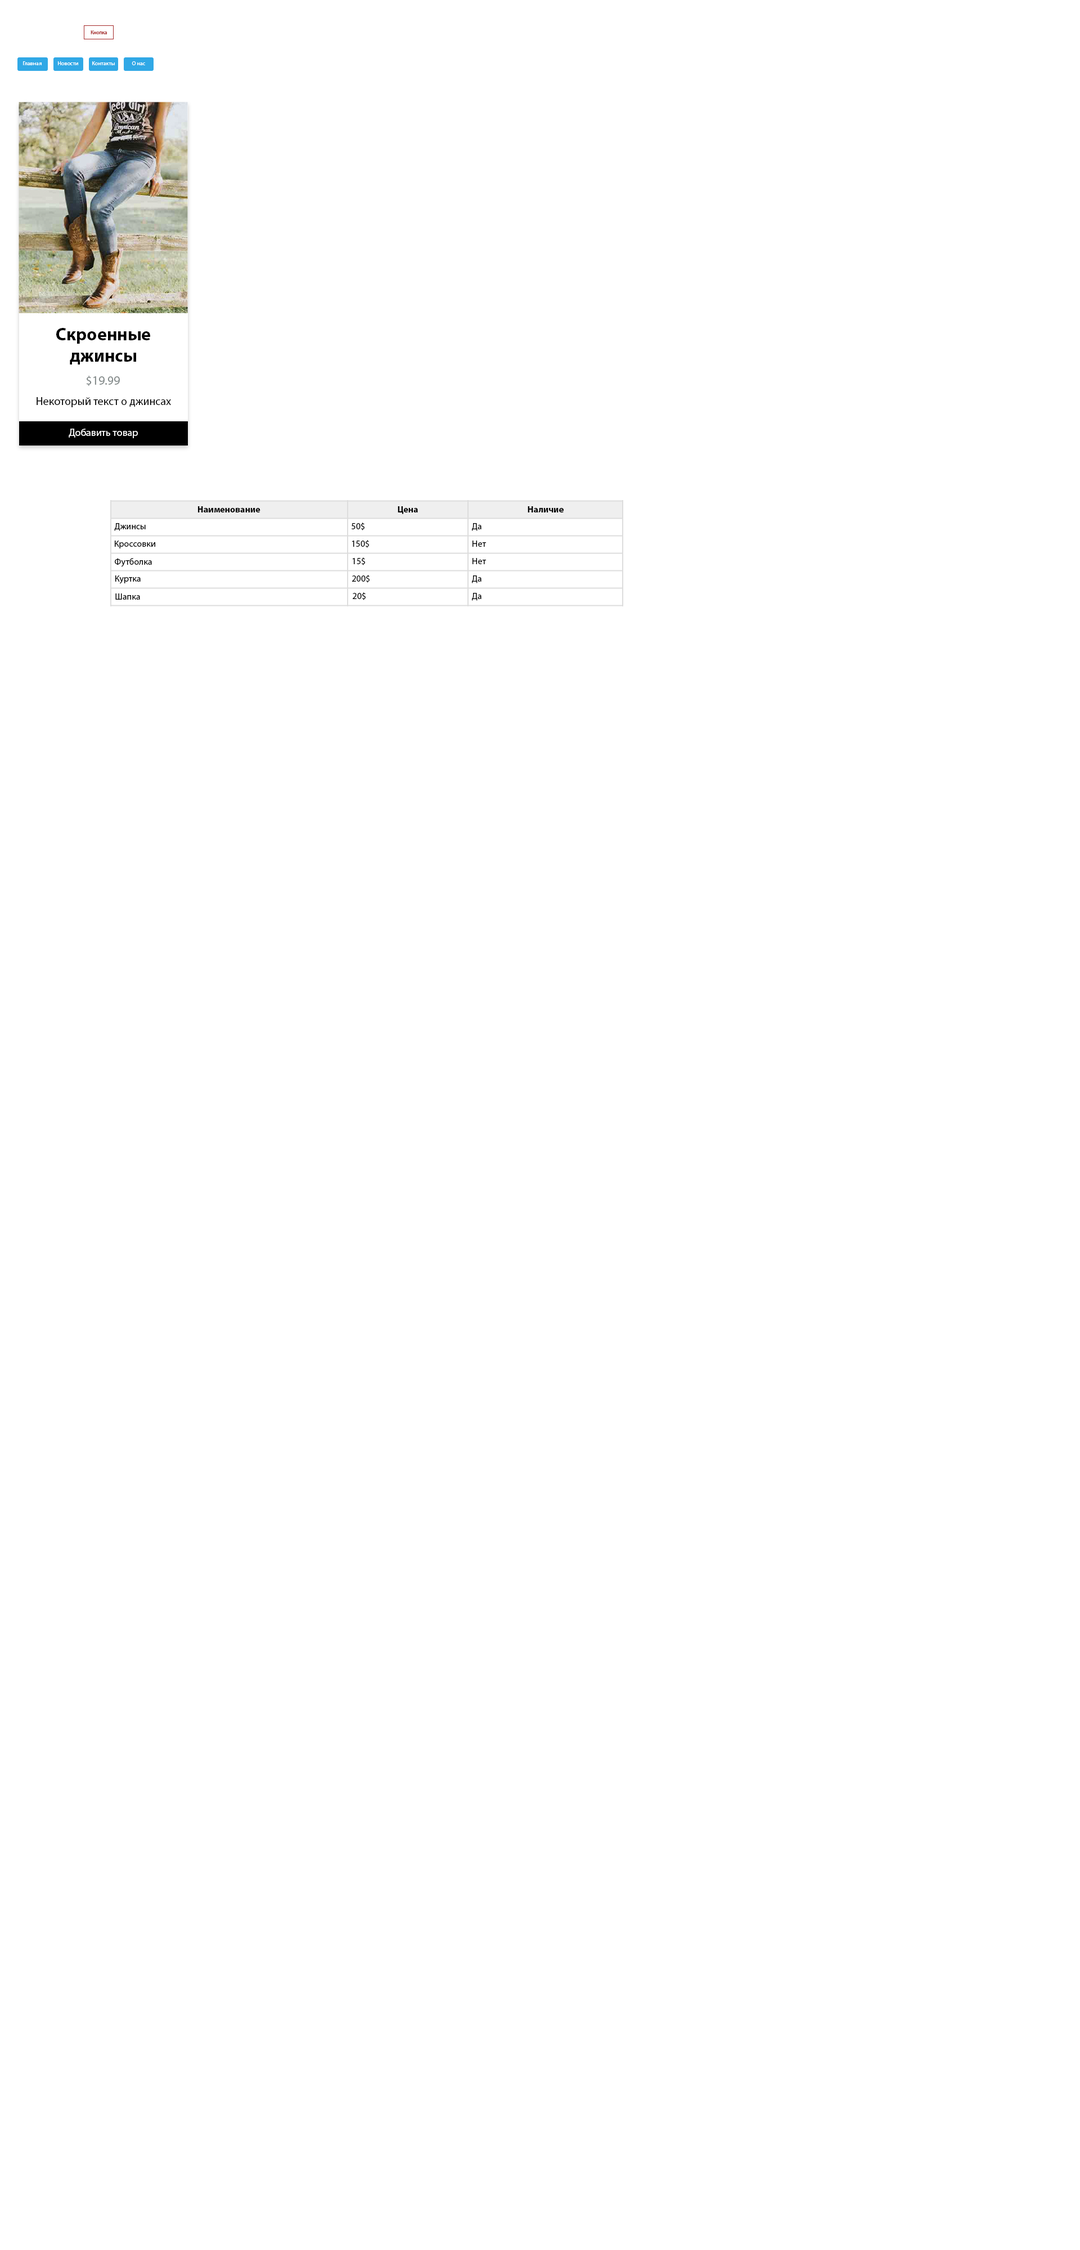
<style>
.page{position:relative;width:1080px;height:2250px;background:#ffffff}
.page>*{position:absolute;margin:0}
.t1{font:5.6px "MyriadPro-Regular";color:#a52a2a;scale:0.94 1}
.t2{font:5.6px "MyriadPro-Regular";color:#ffffff}
.t3{font:18px "MyriadPro-Bold";color:#000000}
.t4{font:12.4px "MyriadPro-Regular";color:#808787}
.t5{font:11.2px "MyriadPro-Regular";color:#000000}
.t6{font:10.1px "MyriadPro-Regular";color:#ffffff}
.t7{font:9px "MyriadPro-Bold";color:#000000}
.t8{font:9px "MyriadPro-Regular";color:#000000}
</style>
<div class="page">
<p class="t1" style="left:91px;top:30px;width:16px;height:4px">Кнопка</p>
<p class="t2" style="left:23px;top:61px;width:19px;height:4px">Главная</p>
<p class="t2" style="left:58px;top:61px;width:20px;height:4px">Новости</p>
<p class="t2" style="left:92px;top:61px;width:23px;height:4px">Контакты</p>
<p class="t2" style="left:132px;top:61px;width:13px;height:4px">О нас</p>
<p class="t3" style="left:56px;top:328px;width:94px;height:36px;text-align:center">Скроенные<br>джинсы</p>
<p class="t4" style="left:86px;top:375px;width:34px;height:11px">$19.99</p>
<p class="t5" style="left:37px;top:397px;width:134px;height:10px">Некоторый текст о джинсах</p>
<p class="t6" style="left:69px;top:429px;width:69px;height:9px">Добавить товар</p>
<p class="t7" style="left:198px;top:506px;width:62px;height:6px">Наименование</p>
<p class="t7" style="left:398px;top:506px;width:20px;height:8px">Цена</p>
<p class="t7" style="left:528px;top:506px;width:36px;height:6px">Наличие</p>
<p class="t8" style="left:114px;top:523px;width:32px;height:8px">Джинсы</p>
<p class="t8" style="left:352px;top:523px;width:12px;height:7px">50$</p>
<p class="t8" style="left:472px;top:523px;width:10px;height:8px">Да</p>
<p class="t8" style="left:115px;top:541px;width:40px;height:7px">Кроссовки</p>
<p class="t8" style="left:352px;top:540px;width:17px;height:8px">150$</p>
<p class="t8" style="left:472px;top:541px;width:14px;height:6px">Нет</p>
<p class="t8" style="left:115px;top:558px;width:37px;height:9px">Футболка</p>
<p class="t8" style="left:353px;top:557px;width:12px;height:8px">15$</p>
<p class="t8" style="left:472px;top:558px;width:14px;height:6px">Нет</p>
<p class="t8" style="left:115px;top:575px;width:26px;height:9px">Куртка</p>
<p class="t8" style="left:352px;top:575px;width:18px;height:8px">200$</p>
<p class="t8" style="left:472px;top:575px;width:10px;height:8px">Да</p>
<p class="t8" style="left:115px;top:593px;width:25px;height:7px">Шапка</p>
<p class="t8" style="left:353px;top:592px;width:13px;height:8px">20$</p>
<p class="t8" style="left:472px;top:593px;width:10px;height:8px">Да</p>
</div>
